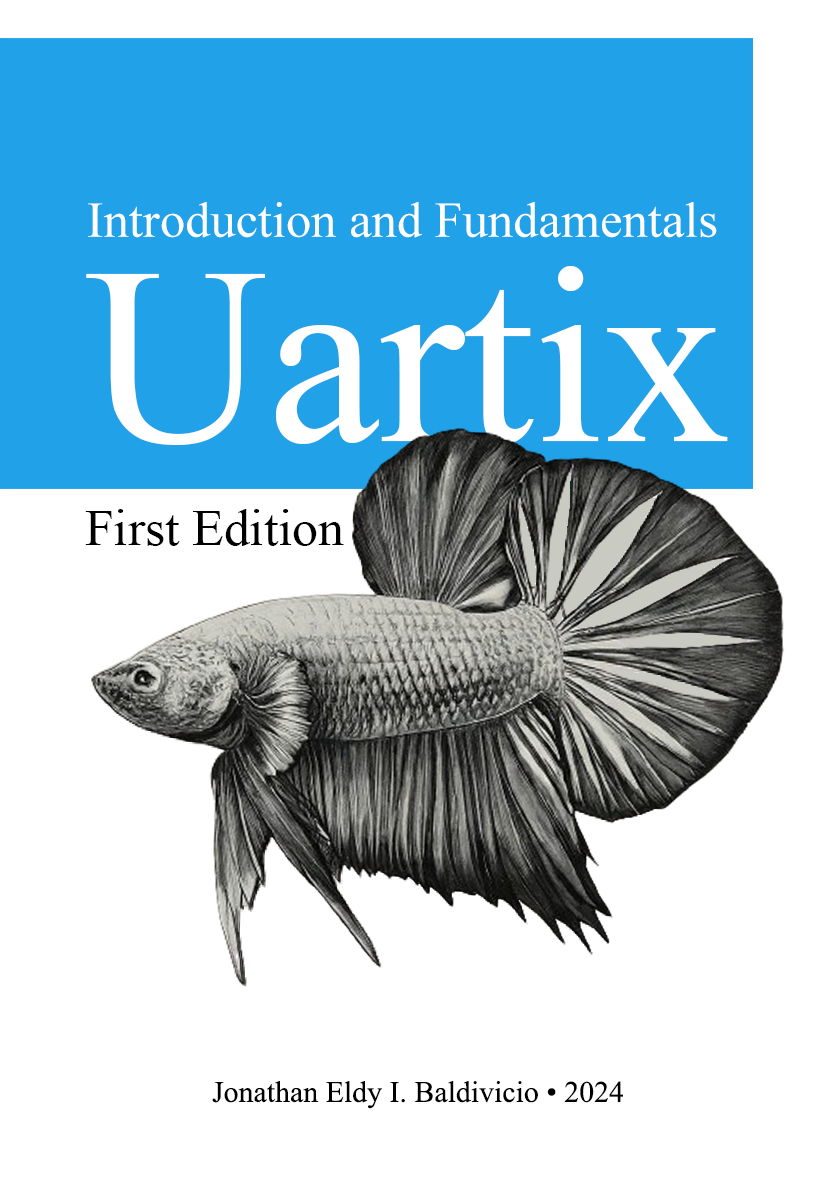
<style>
.page{position:relative;width:840px;height:1190px;background:#ffffff}
.page>*{position:absolute;margin:0}
.t1{font:50.1px "TimesNewRomanPSMT";color:#ffffff}
.t2{font:252px "TimesNewRomanPSMT";color:#ffffff}
.t3{font:51.6px "TimesNewRomanPSMT";color:#000000}
.t4{font:29.9px "TimesNewRomanPSMT";color:#000000}
</style>
<div class="page">
<p class="t1" style="left:88px;top:202px;width:629px;height:36px">Introduction and Fundamentals</p>
<p class="t2" style="left:86px;top:265px;width:642px;height:180px">Uartix</p>
<p class="t3" style="left:85px;top:509px;width:259px;height:37px">First Edition</p>
<p class="t4" style="left:212px;top:1081px;width:411px;height:28px">Jonathan Eldy I. Baldivicio • 2024</p>
</div>
